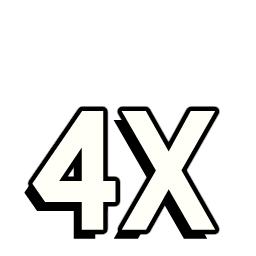
<style>
.page{position:relative;width:256px;height:256px;background:#ffffff}
.page>*{position:absolute;margin:0}
.t1{font:185px "Bombardier";letter-spacing:0.02em;color:#fffff7}
</style>
<div class="page">
<p class="t1" style="left:32px;top:111px;width:183px;height:119px">4X</p>
</div>
